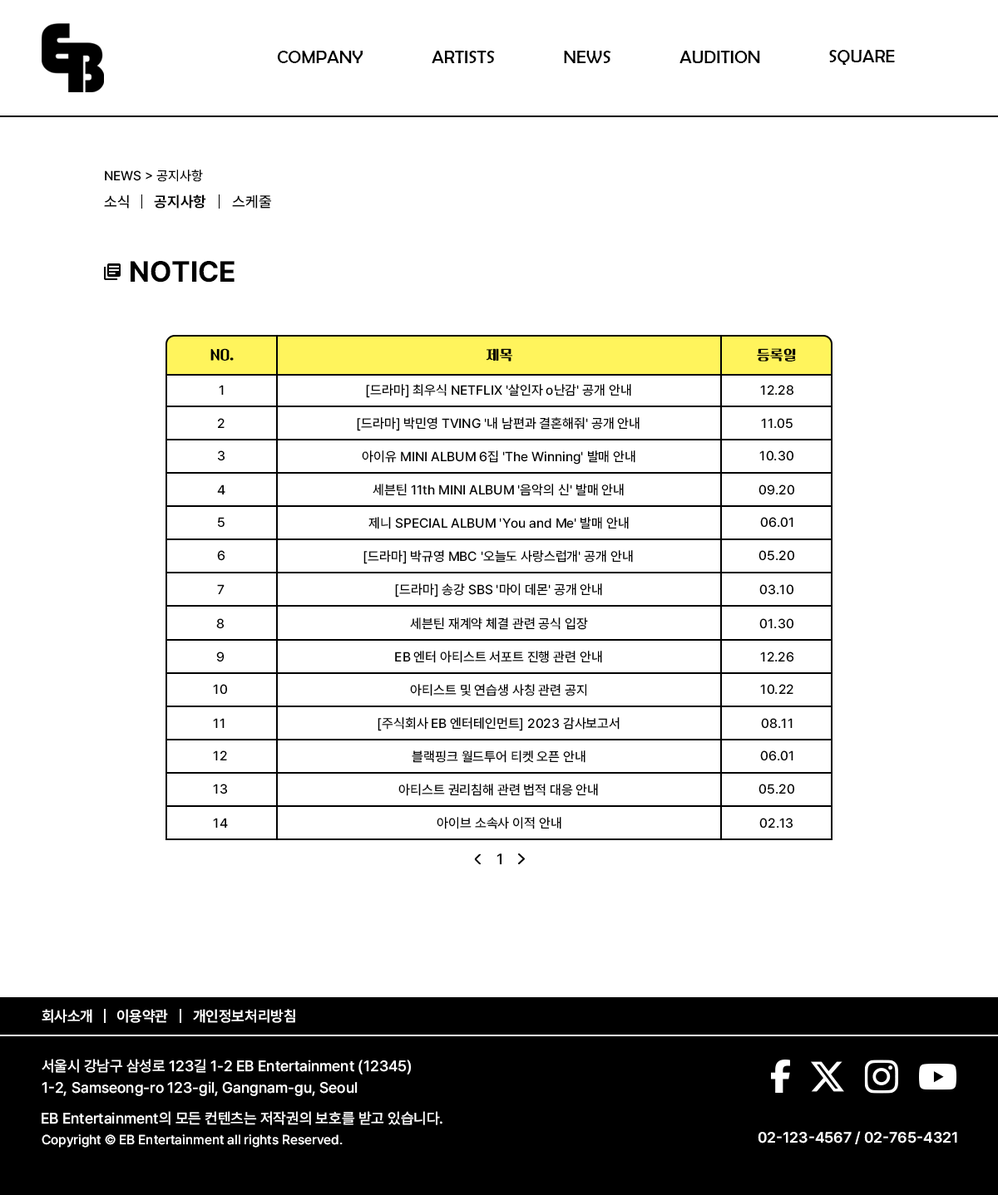
<style>
.page{position:relative;width:998px;height:1195px;background:#ffffff}
.page>*{position:absolute;margin:0}
.t1{font:18.3px "BerlinSansFB-Reg";color:#000000}
.t2{font:13.3px "Pretendard-Medium";color:#000000}
.t3{font:15px "Pretendard-Medium";color:#000000}
.t4{font:15px "Pretendard-Bold";color:#000000}
.t5{font:29.1px "Pretendard-Bold";color:#000000}
.t6{font:13.3px "KoreanBDG-R";color:#000000}
.t7{font:15px "Pretendard-SemiBold";color:#ffffff}
.t8{font:15px/21.6px "Pretendard-Medium";color:#ffffff}
.t9{font:15px "Pretendard-Medium";color:#ffffff}
.t10{font:13.3px "Pretendard-Medium";color:#ffffff}
</style>
<div class="page">
<p class="t1" style="left:277px;top:51px;width:85px;height:12px">COMPANY</p>
<p class="t1" style="left:431px;top:51px;width:64px;height:12px">ARTISTS</p>
<p class="t1" style="left:564px;top:51px;width:47px;height:12px">NEWS</p>
<p class="t1" style="left:679px;top:51px;width:81px;height:12px">AUDITION</p>
<p class="t1" style="left:829px;top:50px;width:65px;height:15px">SQUARE</p>
<p class="t2" style="left:105px;top:170px;width:98px;height:12px">NEWS &gt; 공지사항</p>
<p class="t3" style="left:104px;top:195px;width:25px;height:14px">소식</p>
<p class="t4" style="left:154px;top:195px;width:52px;height:14px">공지사항</p>
<p class="t3" style="left:232px;top:195px;width:40px;height:14px">스케줄</p>
<p class="t5" style="left:131px;top:261px;width:103px;height:22px">NOTICE</p>
<p class="t6" style="left:210px;top:348px;width:24px;height:13px">NO.</p>
<p class="t6" style="left:485px;top:348px;width:27px;height:14px">제목</p>
<p class="t6" style="left:756px;top:348px;width:40px;height:14px">등록일</p>
<p class="t2" style="left:219px;top:385px;width:5px;height:10px">1</p>
<p class="t2" style="left:366px;top:384px;width:265px;height:14px">[드라마] 최우식 NETFLIX '살인자 o난감' 공개 안내</p>
<p class="t2" style="left:760px;top:385px;width:33px;height:11px">12.28</p>
<p class="t2" style="left:218px;top:418px;width:6px;height:10px">2</p>
<p class="t2" style="left:357px;top:417px;width:282px;height:14px">[드라마] 박민영 TVING '내 남편과 결혼해줘' 공개 안내</p>
<p class="t2" style="left:761px;top:418px;width:31px;height:11px">11.05</p>
<p class="t2" style="left:218px;top:451px;width:6px;height:10px">3</p>
<p class="t2" style="left:362px;top:451px;width:273px;height:14px">아이유 MINI ALBUM 6집 'The Winning' 발매 안내</p>
<p class="t2" style="left:759px;top:451px;width:34px;height:10px">10.30</p>
<p class="t2" style="left:217px;top:485px;width:8px;height:10px">4</p>
<p class="t2" style="left:372px;top:484px;width:251px;height:12px">세븐틴 11th MINI ALBUM '음악의 신' 발매 안내</p>
<p class="t2" style="left:758px;top:485px;width:36px;height:10px">09.20</p>
<p class="t2" style="left:218px;top:517px;width:6px;height:11px">5</p>
<p class="t2" style="left:368px;top:517px;width:260px;height:13px">제니 SPECIAL ALBUM 'You and Me' 발매 안내</p>
<p class="t2" style="left:760px;top:517px;width:33px;height:11px">06.01</p>
<p class="t2" style="left:217px;top:550px;width:8px;height:11px">6</p>
<p class="t2" style="left:363px;top:550px;width:270px;height:14px">[드라마] 박규영 MBC '오늘도 사랑스럽개' 공개 안내</p>
<p class="t2" style="left:758px;top:550px;width:36px;height:11px">05.20</p>
<p class="t2" style="left:217px;top:584px;width:7px;height:10px">7</p>
<p class="t2" style="left:395px;top:584px;width:207px;height:14px">[드라마] 송강 SBS '마이 데몬' 공개 안내</p>
<p class="t2" style="left:759px;top:584px;width:34px;height:11px">03.10</p>
<p class="t2" style="left:410px;top:618px;width:178px;height:12px">세븐틴 재계약 체결 관련 공식 입장</p>
<p class="t2" style="left:216px;top:618px;width:8px;height:11px">8</p>
<p class="t2" style="left:759px;top:618px;width:34px;height:11px">01.30</p>
<p class="t2" style="left:216px;top:652px;width:8px;height:11px">9</p>
<p class="t2" style="left:395px;top:651px;width:207px;height:12px">EB 엔터 아티스트 서포트 진행 관련 안내</p>
<p class="t2" style="left:760px;top:652px;width:34px;height:11px">12.26</p>
<p class="t2" style="left:213px;top:684px;width:14px;height:11px">10</p>
<p class="t2" style="left:410px;top:684px;width:176px;height:13px">아티스트 및 연습생 사칭 관련 공지</p>
<p class="t2" style="left:760px;top:684px;width:33px;height:11px">10.22</p>
<p class="t2" style="left:213px;top:718px;width:11px;height:10px">11</p>
<p class="t2" style="left:377px;top:717px;width:242px;height:15px">[주식회사 EB 엔터테인먼트] 2023 감사보고서</p>
<p class="t2" style="left:761px;top:718px;width:31px;height:11px">08.11</p>
<p class="t2" style="left:213px;top:751px;width:14px;height:10px">12</p>
<p class="t2" style="left:411px;top:751px;width:174px;height:12px">블랙핑크 월드투어 티켓 오픈 안내</p>
<p class="t2" style="left:760px;top:751px;width:33px;height:10px">06.01</p>
<p class="t2" style="left:213px;top:784px;width:14px;height:11px">13</p>
<p class="t2" style="left:398px;top:784px;width:200px;height:12px">아티스트 권리침해 관련 법적 대응 안내</p>
<p class="t2" style="left:758px;top:784px;width:36px;height:11px">05.20</p>
<p class="t2" style="left:213px;top:818px;width:15px;height:10px">14</p>
<p class="t2" style="left:436px;top:817px;width:125px;height:13px">아이브 소속사 이적 안내</p>
<p class="t2" style="left:759px;top:818px;width:33px;height:11px">02.13</p>
<p class="t3" style="left:496px;top:854px;width:6px;height:11px">1</p>
<p class="t7" style="left:42px;top:1009px;width:50px;height:14px">회사소개</p>
<p class="t7" style="left:117px;top:1009px;width:51px;height:14px">이용약관</p>
<p class="t7" style="left:193px;top:1009px;width:102px;height:14px">개인정보처리방침</p>
<p class="t8" style="left:42px;top:1059px;width:369px;height:37px">서울시 강남구 삼성로 123길 1-2 EB Entertainment (12345)<br>1-2, Samseong-ro 123-gil, Gangnam-gu, Seoul</p>
<p class="t9" style="left:42px;top:1111px;width:400px;height:15px">EB Entertainment의 모든 컨텐츠는 저작권의 보호를 받고 있습니다.</p>
<p class="t7" style="left:757px;top:1131px;width:200px;height:14px">02-123-4567 / 02-765-4321</p>
<p class="t10" style="left:42px;top:1135px;width:300px;height:13px">Copyright © EB Entertainment all rights Reserved.</p>
</div>
